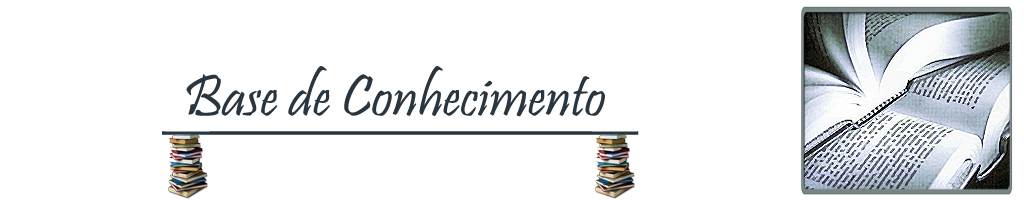
<style>
.page{position:relative;width:1024px;height:200px;background:#ffffff}
.page>*{position:absolute;margin:0}
.t1{font:60px "Pristina-Regular";color:#29363f;text-decoration:underline}
</style>
<div class="page">
<p class="t1" style="left:162px;top:66px;width:477px;height:69px">Base de Conhecimento</p>
</div>
